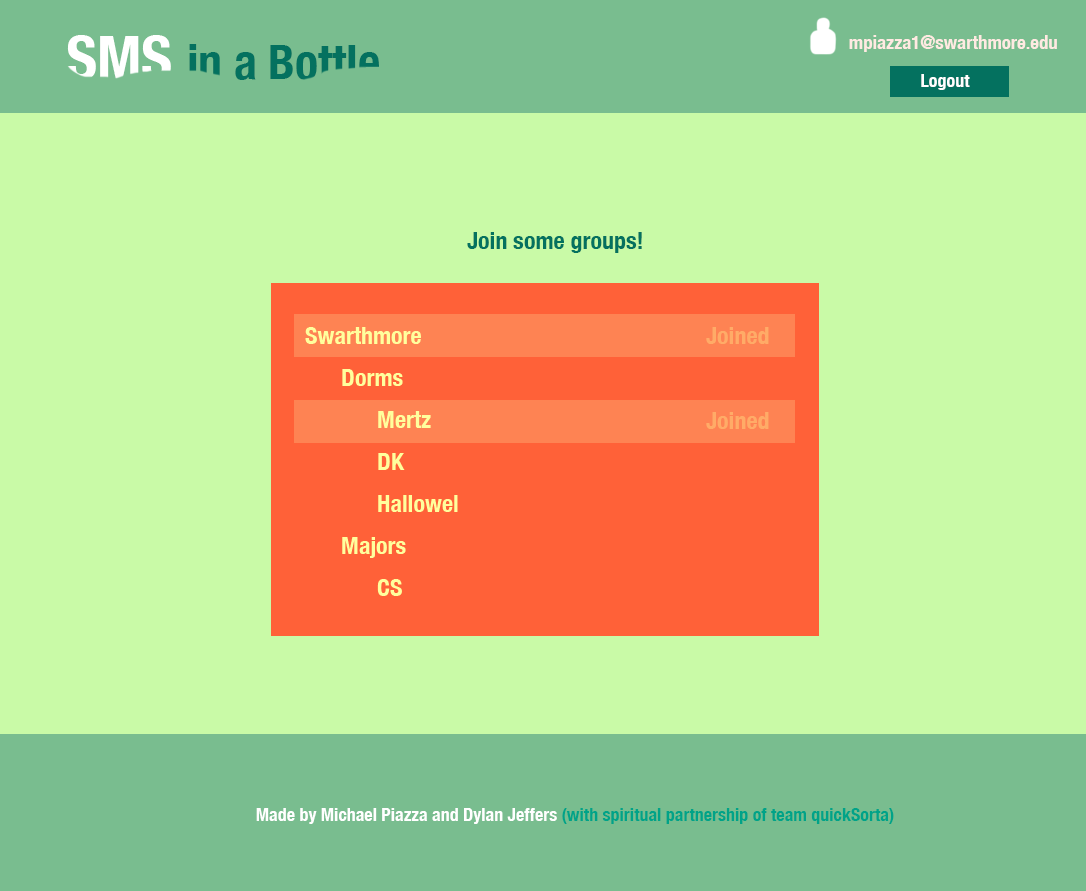
<style>
.page{position:relative;width:1086px;height:891px;background:#c9faa7}
.page>*{position:absolute;margin:0}
.t1{font:19px "HelveticaNeue-CondensedBold";color:#ffeae2}
.t2{font:18px "HelveticaNeue-CondensedBold";color:#ffffff}
.t3{font:24px "HelveticaNeue-CondensedBold";color:#04715f}
.t4{font:24px "HelveticaNeue-CondensedBold";color:#ffab67}
.t5{font:18px "HelveticaNeue-CondensedBold";color:#00a388}
</style>
<div class="page">
<p class="t1" style="left:849px;top:35px;width:208px;height:17px">mpiazza1@swarthmore.edu</p>
<p class="t2" style="left:921px;top:74px;width:49px;height:16px">Logout</p>
<p class="t3" style="left:467px;top:232px;width:175px;height:21px">Join some groups!</p>
<p class="t4" style="left:706px;top:327px;width:63px;height:17px">Joined</p>
<p class="t4" style="left:706px;top:412px;width:63px;height:17px">Joined</p>
<p class="t5" style="left:256px;top:808px;width:638px;height:16px"><span class="t2">Made by Michael Piazza and Dylan Jeffers</span> (with spiritual partnership of team quickSorta)</p>
</div>
